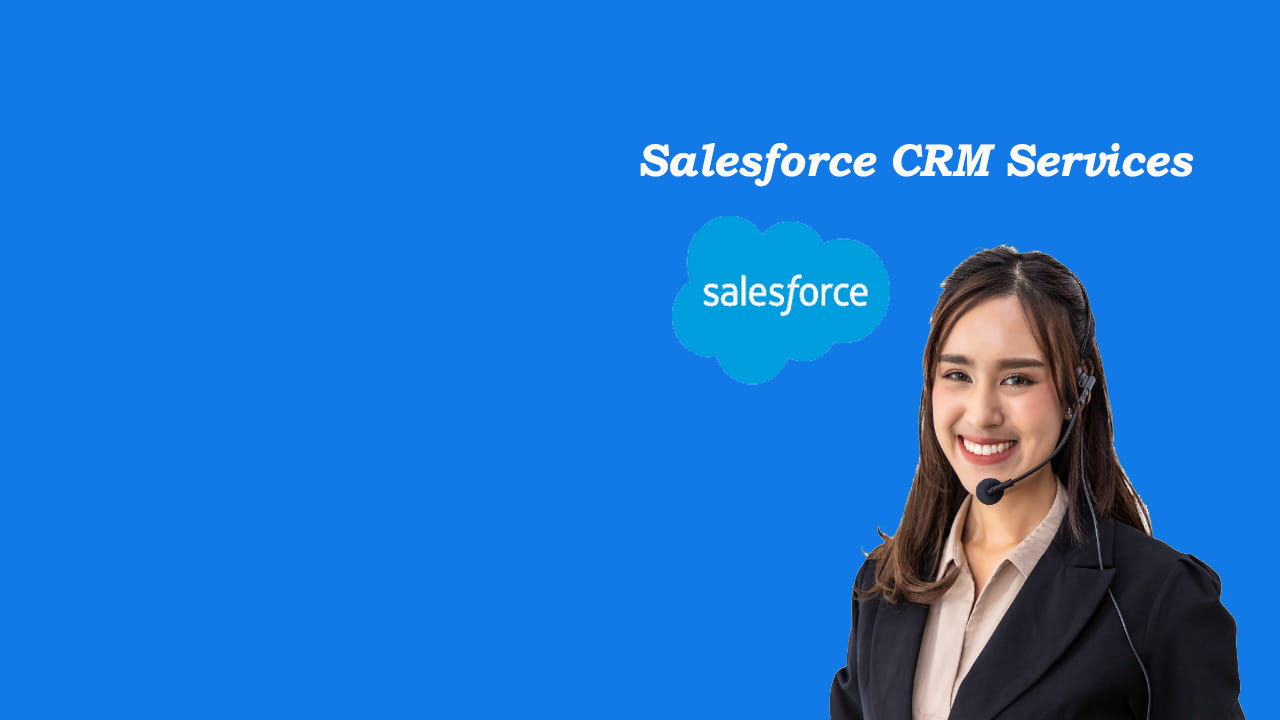
<style>
.page{position:relative;width:1280px;height:720px;background:#117ae7}
.page>*{position:absolute;margin:0}
.t1{font:45.8px "BookmanOldStyle-BoldItalic";color:#fafaf4;scale:0.95 1}
</style>
<div class="page">
<p class="t1" style="left:640px;top:143px;width:554px;height:44px">Salesforce CRM Services</p>
</div>
